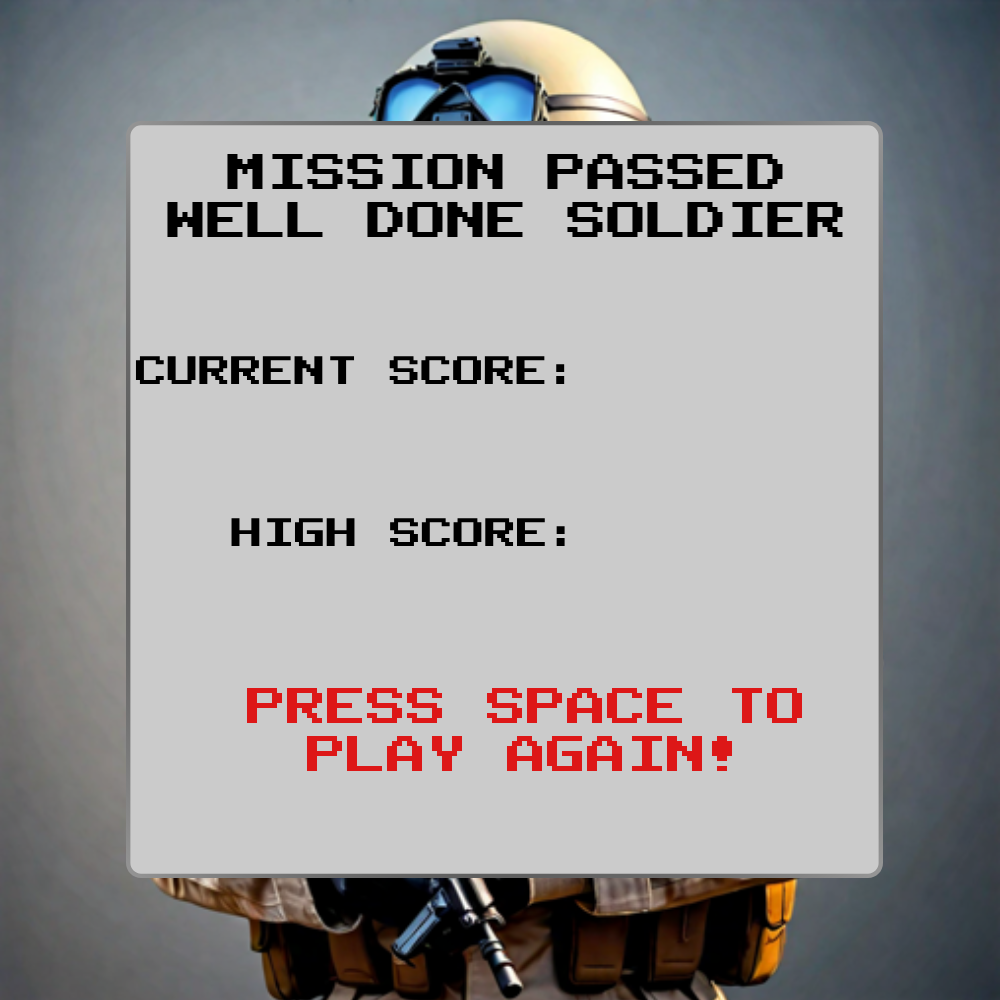
<style>
.page{position:relative;width:1000px;height:1000px;background:#cbcbcb}
.page>*{position:absolute;margin:0}
.t1{font:40px "PublicPixel";color:#000000}
.t2{font:31.7px "PublicPixel";color:#000000}
.t3{font:40px "PublicPixel";color:#dd1717}
</style>
<div class="page">
<p class="t1" style="left:167px;top:153px;width:676px;height:85px;text-align:center">MISSION PASSED<br>WELL DONE SOLDIER</p>
<p class="t2" style="left:135px;top:356px;width:430px;height:28px">CURRENT SCORE:</p>
<p class="t2" style="left:231px;top:518px;width:334px;height:28px">HIGH SCORE:</p>
<p class="t3" style="left:247px;top:688px;width:555px;height:83px;text-align:center">PRESS SPACE TO<br>PLAY AGAIN!</p>
</div>
